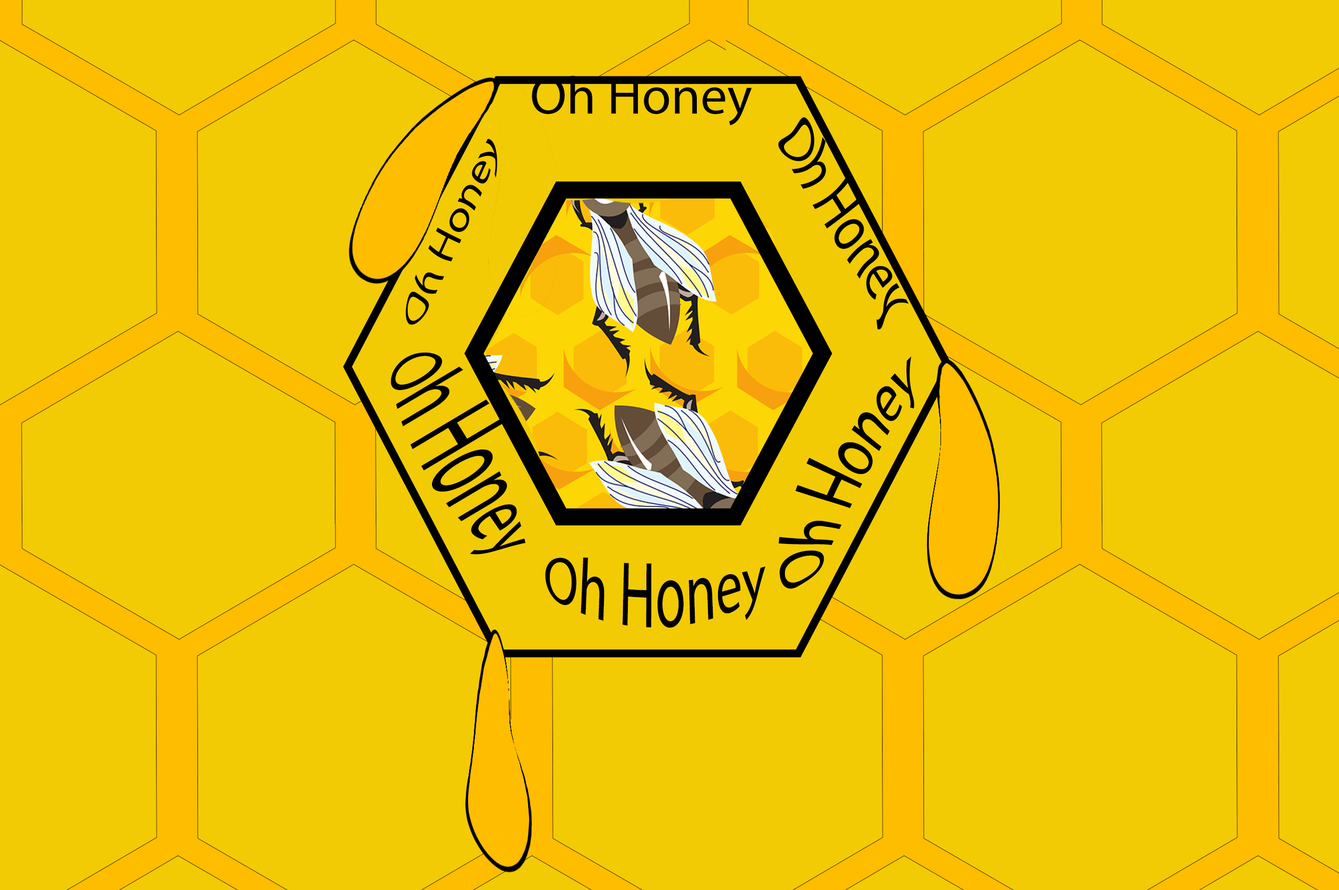
<style>
.page{position:relative;width:1339px;height:890px;background:#f2cb05}
.page>*{position:absolute;margin:0}
.t1{font:53.1px "MyriadPro-Regular";color:#000000}
.t2{font:53.1px "MyriadPro-Regular";color:#000000;scale:1.24 1}
.t3{font:31px "MyriadPro-Regular";color:#000000;scale:1.27 1}
.t4{font:50.2px "MyriadPro-Regular";color:#000000;scale:1.04 1}
</style>
<div class="page">
<p class="t1" style="left:532px;top:76px;width:220px;height:49px">Oh Honey</p>
<p class="t2" style="left:778px;top:117px;width:131px;height:213px;rotate:58deg">Oh Honey</p>
<p class="t3" style="left:406px;top:139px;width:91px;height:186px;rotate:-66deg">Oh Honey</p>
<p class="t1" style="left:391px;top:353px;width:135px;height:202px;rotate:59deg">Oh Honey</p>
<p class="t4" style="left:779px;top:356px;width:136px;height:233px;rotate:-63deg">Oh Honey</p>
<p class="t1" style="left:545px;top:557px;width:221px;height:71px">Oh Honey</p>
</div>
